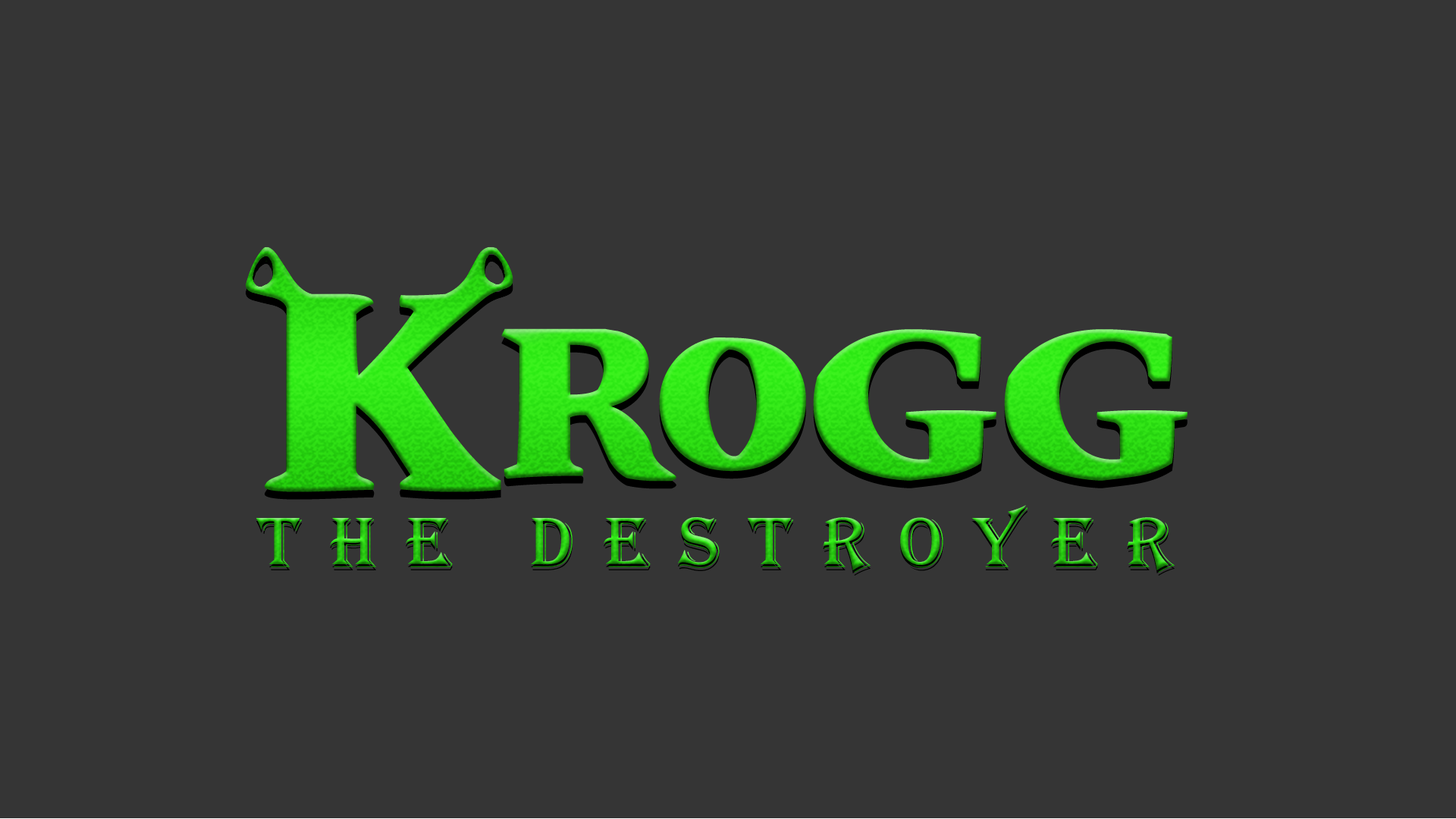
<style>
.page{position:relative;width:1456px;height:819px;background:#353535}
.page>*{position:absolute;margin:0}
.t1{font:73.9px "Algerian";letter-spacing:0.4em}
</style>
<div class="page">
<p class="t1" style="left:256px;top:505px;width:919px;height:68px">THE DESTROYER</p>
</div>
